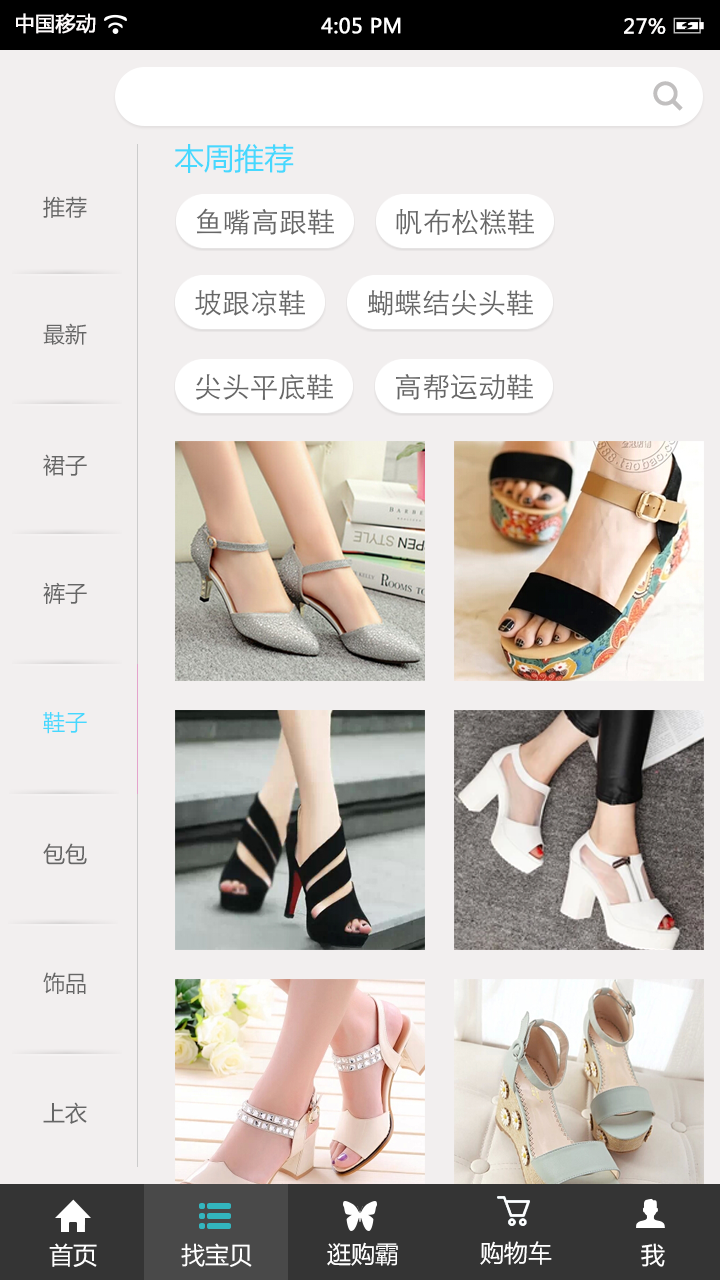
<style>
.page{position:relative;width:720px;height:1280px;background:#f2efef}
.page>*{position:absolute;margin:0}
.t1{font:20px "MicrosoftYaHei";color:#fffcfc;font-weight:bold}
.t2{font:20px "MicrosoftYaHei";color:#ffffff;font-weight:bold}
.t3{font:20px "MicrosoftYaHei";color:#fffefe;font-weight:bold}
.t4{font:30px "MicrosoftYaHei";color:#46d8fe}
.t5{font:22px "MicrosoftYaHei";color:#666666}
.t6{font:22px "MicrosoftYaHei";color:#46d8fe}
.t7{font:24px "MicrosoftYaHei";color:#ffffff}
</style>
<div class="page">
<p class="t1" style="left:16px;top:13px;width:80px;height:21px">中国移动</p>
<p class="t2" style="left:321px;top:17px;width:80px;height:17px">4:05 PM</p>
<p class="t3" style="left:624px;top:18px;width:42px;height:16px">27%</p>
<p class="t4" style="left:174px;top:144px;width:120px;height:30px">本周推荐</p>
<p class="t5" style="left:43px;top:196px;width:44px;height:22px">推荐</p>
<p class="t5" style="left:43px;top:323px;width:44px;height:22px">最新</p>
<p class="t5" style="left:43px;top:454px;width:44px;height:22px">裙子</p>
<p class="t5" style="left:43px;top:582px;width:44px;height:22px">裤子</p>
<p class="t6" style="left:43px;top:712px;width:44px;height:22px">鞋子</p>
<p class="t5" style="left:43px;top:843px;width:44px;height:22px">包包</p>
<p class="t5" style="left:43px;top:972px;width:43px;height:22px">饰品</p>
<p class="t5" style="left:43px;top:1102px;width:44px;height:22px">上衣</p>
<p class="t7" style="left:480px;top:1241px;width:72px;height:24px">购物车</p>
<p class="t7" style="left:49px;top:1243px;width:48px;height:24px">首页</p>
<p class="t7" style="left:181px;top:1243px;width:71px;height:24px">找宝贝</p>
<p class="t7" style="left:327px;top:1242px;width:71px;height:24px">逛购霸</p>
<p class="t7" style="left:641px;top:1243px;width:24px;height:24px">我</p>
</div>
